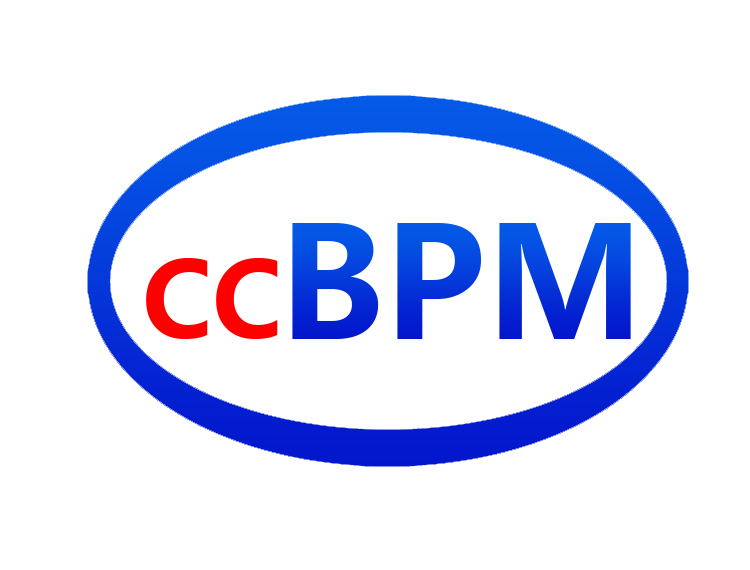
<style>
.page{position:relative;width:750px;height:570px;background:#ffffff}
.page>*{position:absolute;margin:0}
.t1{font:154.2px "MicrosoftYaHei-Bold"}
.t2{font:104.2px "MicrosoftYaHei-Bold";color:#ff0000}
</style>
<div class="page">
<p class="t1" style="left:292px;top:223px;width:339px;height:116px">BPM</p>
<p class="t2" style="left:146px;top:258px;width:132px;height:81px">CC</p>
</div>
